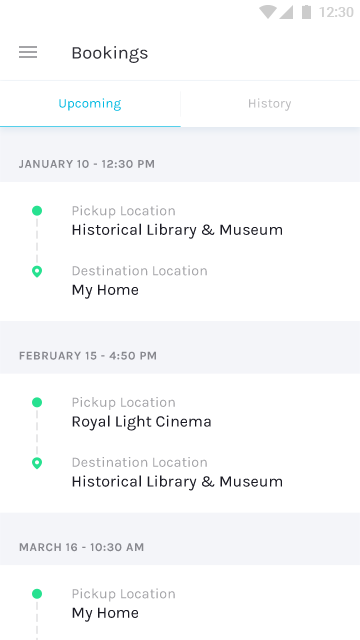
<style>
.page{position:relative;width:360px;height:640px;background:#ffffff}
.page>*{position:absolute;margin:0}
.t1{font:18px "Karla-Regular";color:#1b1b24}
.t2{font:13.3px "Karla-Regular";color:#00b9e1}
.t3{font:13.3px "Karla-Regular";color:#bababd}
.t4{font:11.7px "Karla-Bold";letter-spacing:0.05em;color:#87888e;text-transform:uppercase}
.t5{font:14.1px "Karla-Regular";color:#a4a4a7}
.t6{font:16px "Karla-Regular";color:#1b1b24}
</style>
<div class="page">
<p class="t1" style="left:72px;top:46px;width:76px;height:17px;opacity:0.9">Bookings</p>
<p class="t2" style="left:59px;top:98px;width:62px;height:13px">Upcoming</p>
<p class="t3" style="left:249px;top:98px;width:42px;height:13px">History</p>
<p class="t4" style="left:19px;top:160px;width:135px;height:8px">January 10 - 12:30 PM</p>
<p class="t5" style="left:72px;top:205px;width:103px;height:14px">Pickup Location</p>
<p class="t6" style="left:72px;top:223px;width:210px;height:16px">Historical Library &amp; Museum</p>
<p class="t5" style="left:72px;top:265px;width:135px;height:11px">Destination Location</p>
<p class="t6" style="left:72px;top:284px;width:66px;height:15px">My Home</p>
<p class="t4" style="left:19px;top:351px;width:137px;height:9px">February 15 - 4:50 PM</p>
<p class="t5" style="left:72px;top:397px;width:103px;height:13px">Pickup Location</p>
<p class="t6" style="left:72px;top:415px;width:139px;height:16px">Royal Light Cinema</p>
<p class="t5" style="left:72px;top:457px;width:135px;height:10px">Destination Location</p>
<p class="t6" style="left:72px;top:475px;width:210px;height:16px">Historical Library &amp; Museum</p>
<p class="t4" style="left:19px;top:543px;width:125px;height:9px">March 16 - 10:30 AM</p>
<p class="t5" style="left:72px;top:588px;width:103px;height:14px">Pickup Location</p>
<p class="t6" style="left:72px;top:607px;width:66px;height:15px">My Home</p>
</div>
